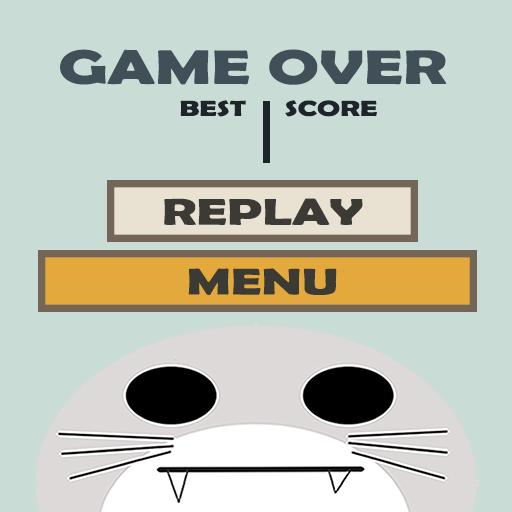
<style>
.page{position:relative;width:512px;height:512px;background:#c9dcd6}
.page>*{position:absolute;margin:0}
.t1{font:48.7px "BerlinSansFBDemi-Bold";color:#414f58;scale:1.41 1}
.t2{font:21.9px "BerlinSansFBDemi-Bold";color:#1d252b;scale:1.41 1}
.t3{font:37.4px "BerlinSansFBDemi-Bold";color:#3c3a35;scale:1.45 1}
</style>
<div class="page">
<p class="t1" style="left:60px;top:49px;width:387px;height:36px">GAME OVER</p>
<p class="t2" style="left:180px;top:100px;width:66px;height:17px">BEST</p>
<p class="t2" style="left:285px;top:100px;width:92px;height:17px">SCORE</p>
<p class="t3" style="left:164px;top:198px;width:199px;height:27px">REPLAY</p>
<p class="t3" style="left:188px;top:268px;width:149px;height:27px">MENU</p>
</div>
